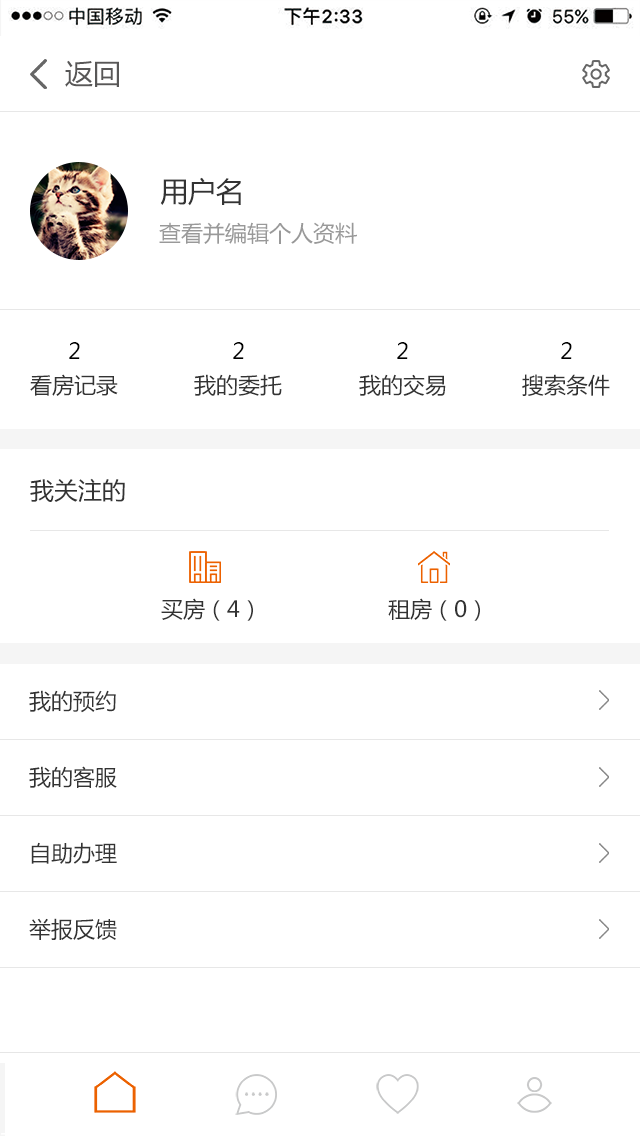
<style>
.page{position:relative;width:640px;height:1136px;background:#ffffff}
.page>*{position:absolute;margin:0}
.t1{font:28px "MicrosoftYaHei";color:#585757}
.t2{font:28px "MicrosoftYaHei";color:#333333}
.t3{font:22px "MicrosoftYaHei";color:#999999}
.t4{font:22px "MicrosoftYaHei";color:#000000}
.t5{font:22px "MicrosoftYaHei";color:#333333}
.t6{font:24px "MicrosoftYaHei";color:#333333}
</style>
<div class="page">
<p class="t1" style="left:65px;top:60px;width:54px;height:27px">返回</p>
<p class="t2" style="left:160px;top:177px;width:81px;height:29px">用户名</p>
<p class="t3" style="left:159px;top:222px;width:198px;height:22px">查看并编辑个人资料</p>
<p class="t4" style="left:69px;top:342px;width:11px;height:17px">2</p>
<p class="t4" style="left:233px;top:342px;width:11px;height:17px">2</p>
<p class="t4" style="left:397px;top:342px;width:11px;height:17px">2</p>
<p class="t4" style="left:561px;top:342px;width:11px;height:17px">2</p>
<p class="t5" style="left:30px;top:374px;width:88px;height:22px">看房记录</p>
<p class="t5" style="left:194px;top:374px;width:88px;height:22px">我的委托</p>
<p class="t5" style="left:359px;top:374px;width:87px;height:22px">我的交易</p>
<p class="t5" style="left:522px;top:374px;width:88px;height:22px">搜索条件</p>
<p class="t6" style="left:30px;top:478px;width:95px;height:24px">我关注的</p>
<p class="t5" style="left:161px;top:598px;width:92px;height:23px">买房（4）</p>
<p class="t5" style="left:388px;top:598px;width:92px;height:23px">租房（0）</p>
<p class="t5" style="left:29px;top:690px;width:87px;height:23px">我的预约</p>
<p class="t5" style="left:29px;top:766px;width:88px;height:22px">我的客服</p>
<p class="t5" style="left:31px;top:842px;width:86px;height:22px">自助办理</p>
<p class="t5" style="left:29px;top:918px;width:88px;height:22px">举报反馈</p>
</div>
